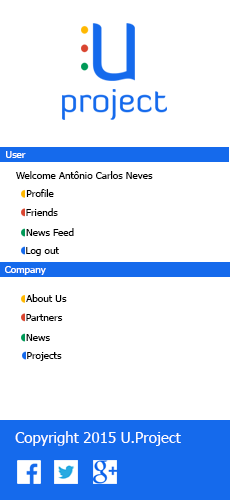
<style>
.page{position:relative;width:230px;height:500px;background:#ffffff}
.page>*{position:absolute;margin:0}
.t1{font:10px "Tahoma";color:#ffffff}
.t2{font:10px "Tahoma";color:#000000}
.t3{font:15px "Tahoma";color:#ffffff}
</style>
<div class="page">
<p class="t1" style="left:6px;top:151px;width:20px;height:7px">User</p>
<p class="t2" style="left:16px;top:171px;width:137px;height:8px">Welcome Antônio Carlos Neves</p>
<p class="t2" style="left:26px;top:189px;width:28px;height:8px">Profile</p>
<p class="t2" style="left:26px;top:208px;width:32px;height:8px">Friends</p>
<p class="t2" style="left:26px;top:228px;width:48px;height:8px">News Feed</p>
<p class="t2" style="left:26px;top:247px;width:33px;height:9px">Log out</p>
<p class="t1" style="left:5px;top:266px;width:41px;height:9px">Company</p>
<p class="t2" style="left:26px;top:294px;width:41px;height:8px">About Us</p>
<p class="t2" style="left:26px;top:314px;width:37px;height:7px">Partners</p>
<p class="t2" style="left:26px;top:334px;width:24px;height:7px">News</p>
<p class="t2" style="left:27px;top:352px;width:35px;height:9px">Projects</p>
<p class="t3" style="left:15px;top:431px;width:166px;height:15px">Copyright 2015 U.Project</p>
</div>
